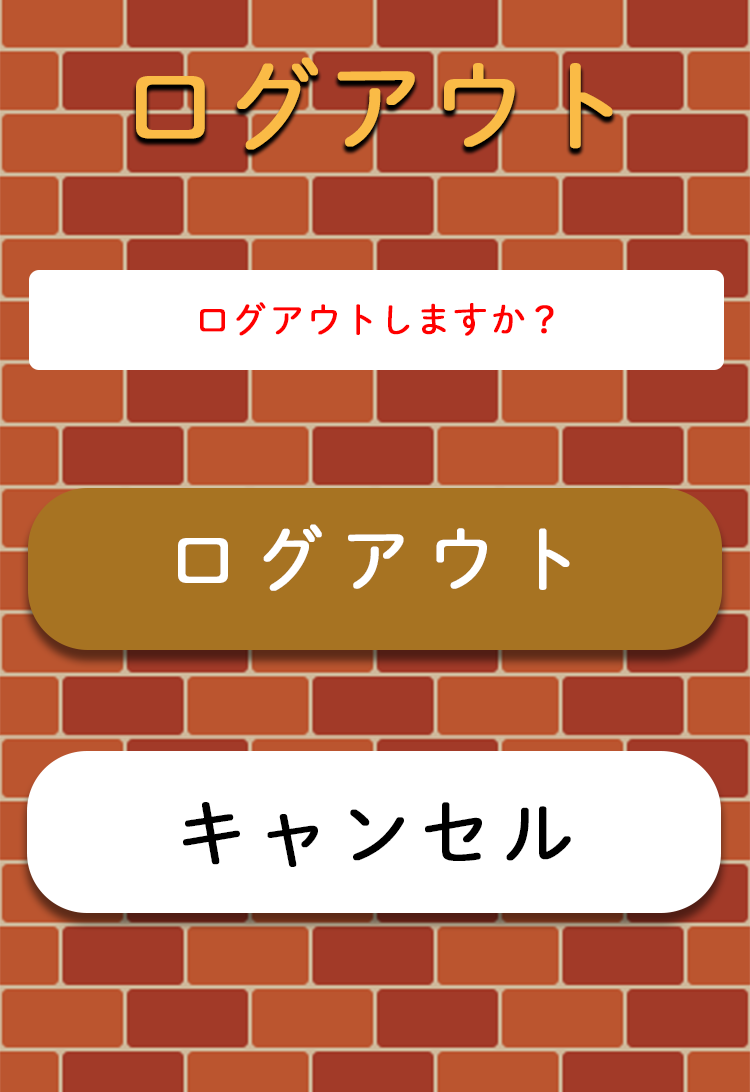
<style>
.page{position:relative;width:750px;height:1092px;background:#bb552f}
.page>*{position:absolute;margin:0}
.t1{font:100px "DNPShueiMGoStd-L";color:#fabb46;font-weight:bold}
.t2{font:36px "DNPShueiMGoStd-L";color:#ff0000;font-weight:bold}
.t3{font:72px "DNPShueiMGoStd-L";color:#ffffff;font-weight:bold}
.t4{font:72px "DNPShueiMGoStd-L";color:#000000;font-weight:bold}
</style>
<div class="page">
<p class="t1" style="left:136px;top:57px;width:477px;height:93px">ログアウト</p>
<p class="t2" style="left:200px;top:302px;width:354px;height:34px">ログアウトしますか？</p>
<p class="t3" style="left:178px;top:524px;width:392px;height:67px">ログアウト</p>
<p class="t4" style="left:183px;top:802px;width:388px;height:65px">キャンセル</p>
</div>
